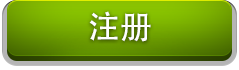
<style>
.page{position:relative;width:239px;height:70px}
.page>*{position:absolute;margin:0}
.t1{font:32px "AdobeHeitiStd-Regular";color:#fefefe}
</style>
<div class="page">
<p class="t1" style="left:89px;top:11px;width:62px;height:31px">注册</p>
</div>
